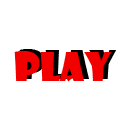
<style>
.page{position:relative;width:128px;height:128px;background:#ffffff}
.page>*{position:absolute;margin:0}
.t1{font:39px "ShowcardGothic-Reg";color:#f20000}
</style>
<div class="page">
<p class="t1" style="left:14px;top:51px;width:98px;height:31px">Play</p>
</div>
